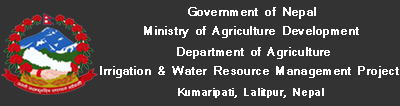
<style>
.page{position:relative;width:400px;height:106px;background:#333333}
.page>*{position:absolute;margin:0}
.t1{font:12px "Mangal";color:#ffffff;font-weight:bold}
.t2{font:11px "Mangal";color:#ffffff;font-weight:bold}
</style>
<div class="page">
<p class="t1" style="left:188px;top:7px;width:128px;height:12px">Government of Nepal</p>
<p class="t1" style="left:144px;top:26px;width:215px;height:12px">Ministry of Agriculture Development</p>
<p class="t1" style="left:177px;top:47px;width:153px;height:12px">Department of Agriculture</p>
<p class="t1" style="left:100px;top:66px;width:299px;height:12px">Irrigation &amp; Water Resource Management Project</p>
<p class="t2" style="left:178px;top:88px;width:146px;height:10px">Kumaripati, Lalitpur, Nepal</p>
</div>
